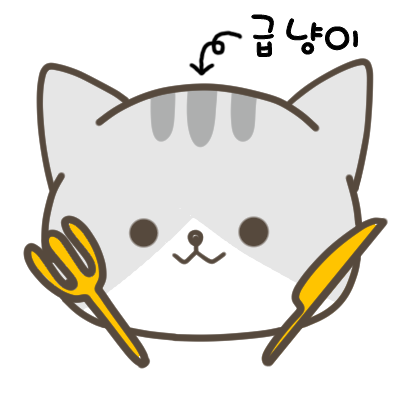
<style>
.page{position:relative;width:400px;height:400px;background:#ffffff}
.page>*{position:absolute;margin:0}
.t1{font:50px "RixCatfarmM";color:#000000}
</style>
<div class="page">
<p class="t1" style="left:251px;top:15px;width:107px;height:42px">급냥이</p>
</div>
